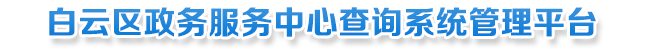
<style>
.page{position:relative;width:647px;height:49px;background:#ffffff}
.page>*{position:absolute;margin:0}
.t1{font:32px "FZZCHJW--GB1-0";letter-spacing:0.015em;color:#2288db}
</style>
<div class="page">
<p class="t1" style="left:49px;top:7px;width:547px;height:30px">白云区政务服务中心查询系统管理平台</p>
</div>
